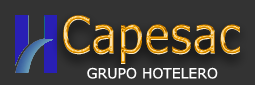
<style>
.page{position:relative;width:255px;height:85px;background:#333333}
.page>*{position:absolute;margin:0}
.t1{font:51.4px "Verdana";scale:0.84 1}
.t2{font:14px "Verdana";color:#ffffff}
</style>
<div class="page">
<p class="t1" style="left:63px;top:15px;width:177px;height:49px">Capesac</p>
<p class="t2" style="left:87px;top:67px;width:131px;height:12px">GRUPO HOTELERO</p>
</div>
